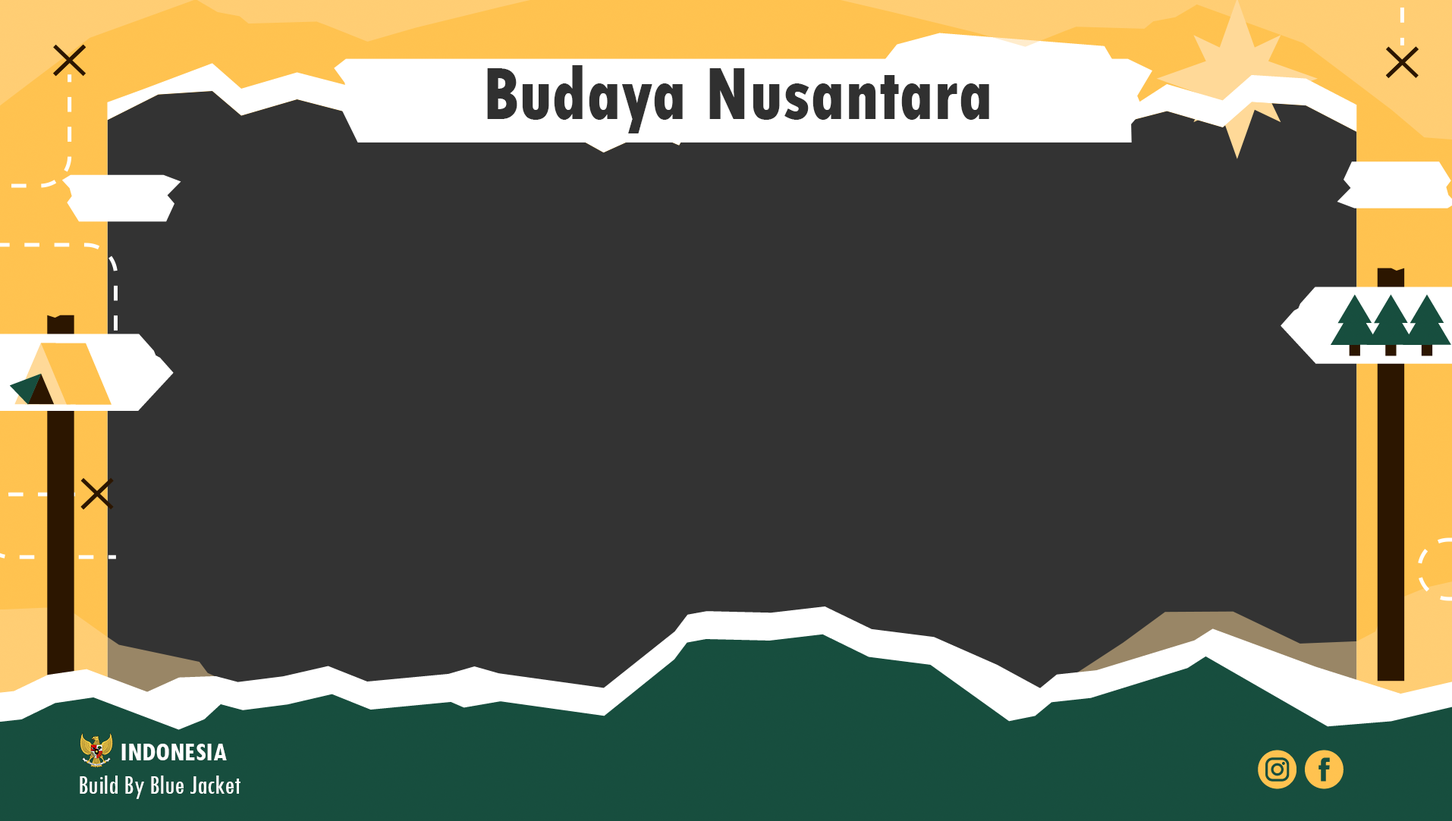
<style>
.page{position:relative;width:1452px;height:821px;background:#333333}
.page>*{position:absolute;margin:0}
.t1{font:78.1px "TwCenMT-CondensedExtraBold";color:#333333;scale:0.92 1}
.t2{font:27.1px "TwCenMT-CondensedBold";color:#ffffff}
.t3{font:27.8px "TwCenMT-Condensed";color:#ffffff}
</style>
<div class="page">
<p class="t1" style="left:487px;top:65px;width:502px;height:68px">Budaya Nusantara</p>
<p class="t2" style="left:121px;top:744px;width:106px;height:17px">INDONESIA</p>
<p class="t3" style="left:80px;top:776px;width:160px;height:23px">Build By Blue Jacket</p>
</div>
